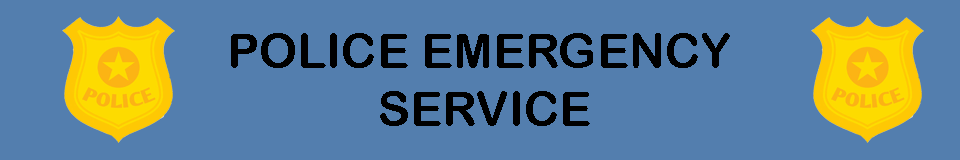
<style>
.page{position:relative;width:960px;height:160px;background:#537eae}
.page>*{position:absolute;margin:0}
.t1{font:48px "ArialRoundedMTBold";color:#000000}
</style>
<div class="page">
<p class="t1" style="left:231px;top:33px;width:499px;height:93px;text-align:center">POLICE EMERGENCY <br>SERVICE</p>
</div>
